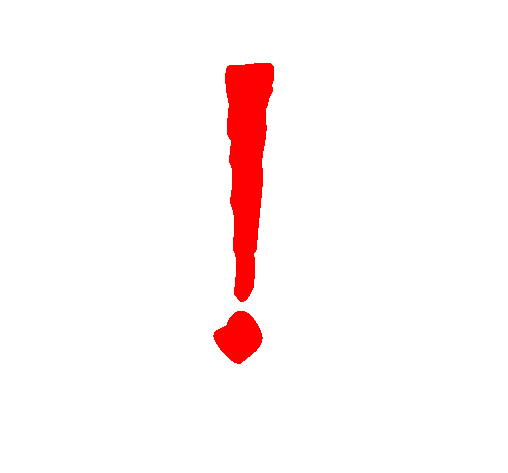
<style>
.page{position:relative;width:508px;height:473px;background:#ffffff}
.page>*{position:absolute;margin:0}
.t1{font:328px "HamletOrNot";color:#ff0000}
</style>
<div class="page">
<p class="t1" style="left:213px;top:63px;width:61px;height:301px">!</p>
</div>
